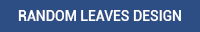
<style>
.page{position:relative;width:200px;height:32px;background:#2c4e85}
.page>*{position:absolute;margin:0}
.t1{font:14px "Roboto-Medium";color:#ffffff}
</style>
<div class="page">
<p class="t1" style="left:18px;top:10px;width:163px;height:11px">RANDOM LEAVES DESIGN</p>
</div>
